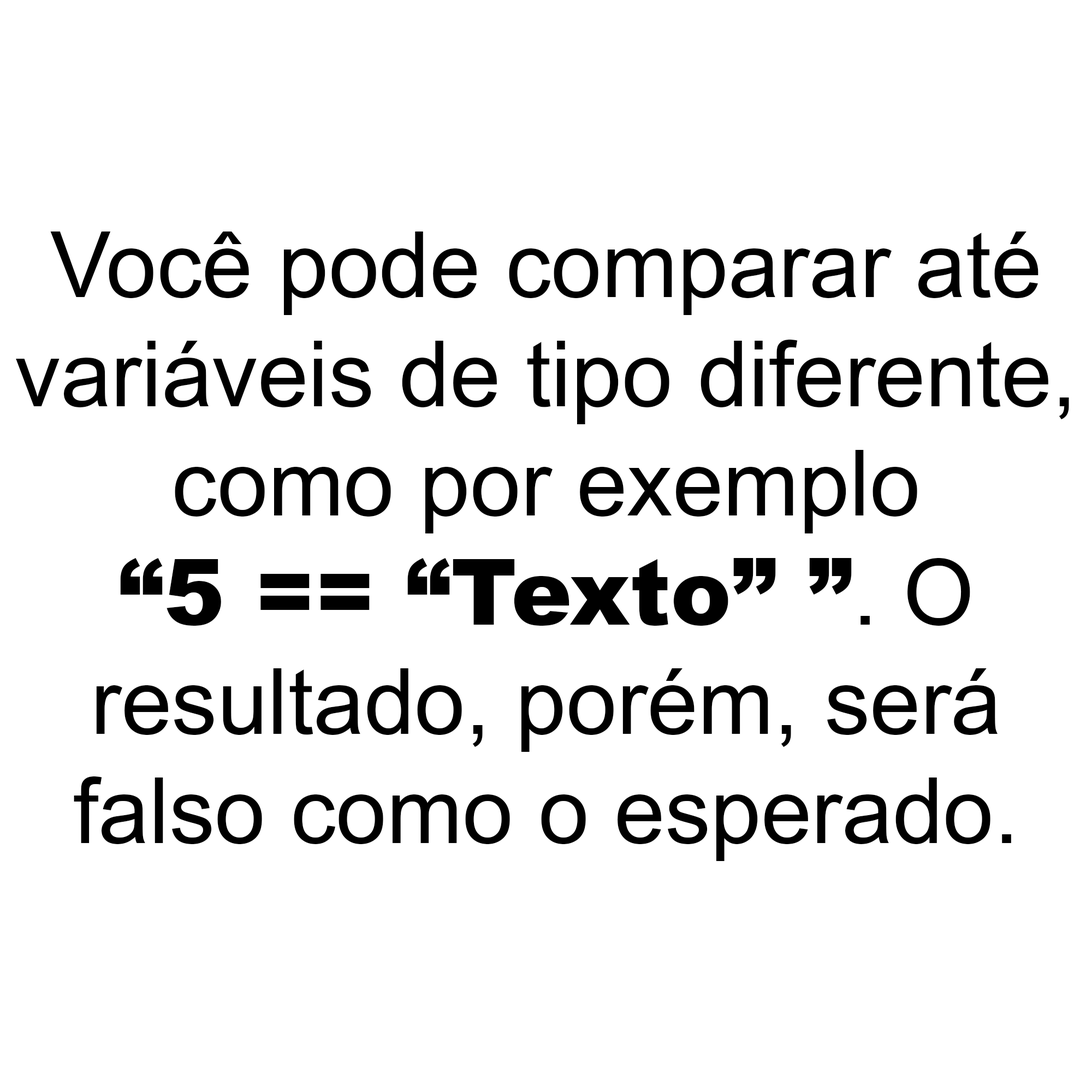
<style>
.page{position:relative;width:1092px;height:1092px;background:#ffffff}
.page>*{position:absolute;margin:0}
.t1{font:91px "ArialMT";color:#000000}
.t2{font:91px "Arial-Black";color:#000000}
</style>
<div class="page">
<p class="t1" style="left:16px;top:232px;width:1053px;height:629px;text-align:center">Você pode comparar até<br>variáveis de tipo diferente,<br>como por exemplo<br><span class="t2">“5 == “Texto” ”</span>. O<br>resultado, porém, será<br>falso como o esperado.</p>
</div>
